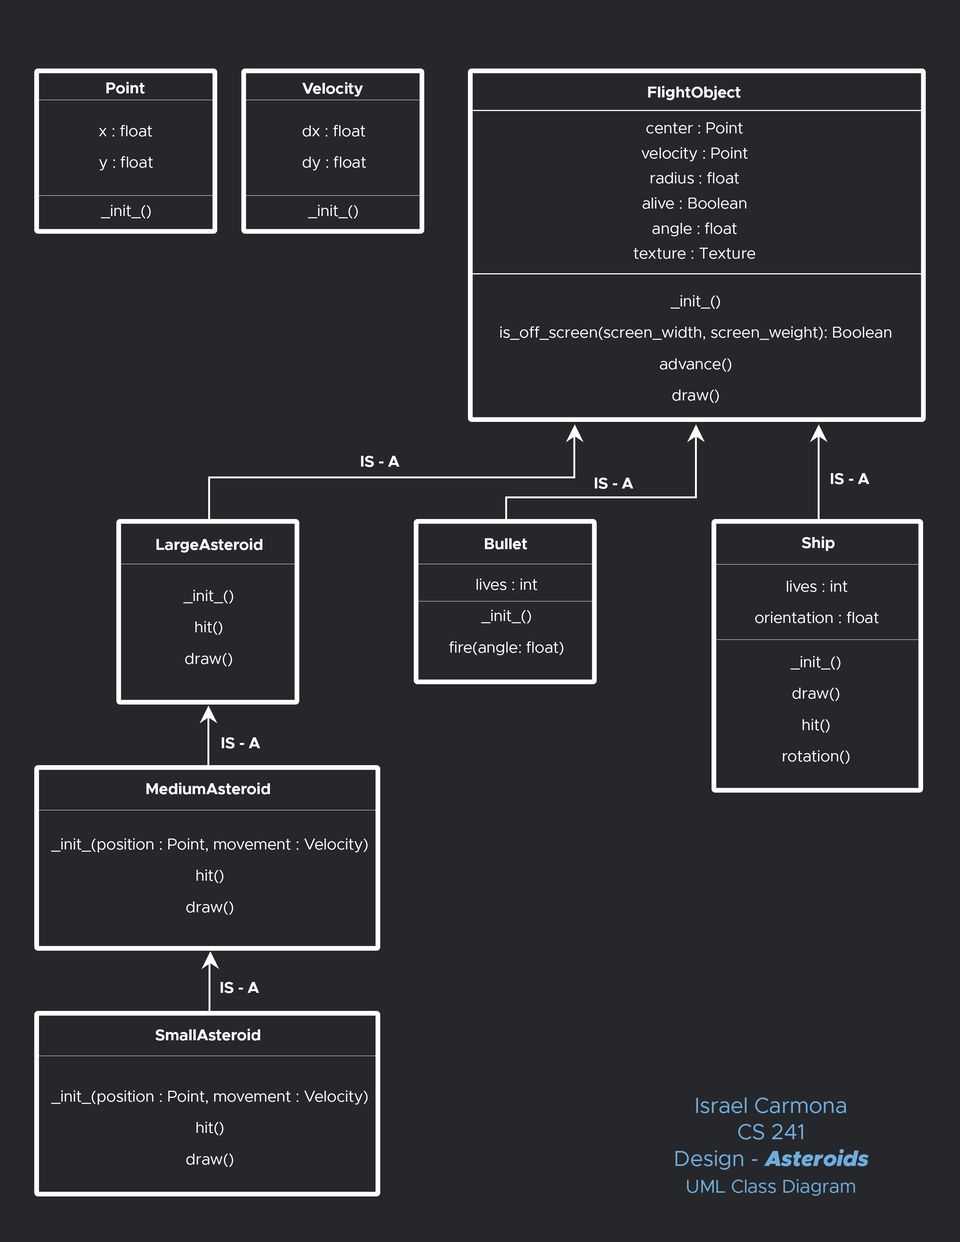
<style>
.page{position:relative;width:960px;height:1242px;background:#26272b}
.page>*{position:absolute;margin:0}
.t1{font:15.7px "Metropolis-Bold";letter-spacing:-0.012em;color:#fbfcfe}
.t2{font:15.7px/15.7px "Metropolis-Regular";letter-spacing:-0.012em;color:#fbfcfe}
.t3{font:15.7px/12.5px "Metropolis-Regular";letter-spacing:-0.012em;color:#fbfcfe}
.t4{font:15.7px "Metropolis-Regular";letter-spacing:-0.012em;color:#fbfcfe}
.t5{font:22px/26.7px "Metropolis-Regular";letter-spacing:-0.012em;color:#6eacdb}
.t6{font:22px/26.7px "Metropolis-BlackItalic";letter-spacing:-0.012em;color:#6eacdb}
.t7{font:18.8px/26.7px "Metropolis-Regular";letter-spacing:-0.012em;color:#6eacdb}
</style>
<div class="page">
<p class="t1" style="left:106px;top:82px;width:39px;height:12px">Point</p>
<p class="t1" style="left:302px;top:82px;width:61px;height:15px">Velocity</p>
<p class="t1" style="left:648px;top:86px;width:93px;height:15px">FlightObject</p>
<p class="t2" style="left:99px;top:125px;width:54px;height:46px">x : float<br><br>y : float</p>
<p class="t2" style="left:303px;top:125px;width:63px;height:46px">dx : float<br><br>dy : float</p>
<p class="t3" style="left:634px;top:122px;width:121px;height:137px;text-align:center">center : Point<br><br>velocity : Point<br><br>radius : float<br><br>alive : Boolean<br><br>angle : float<br><br>texture : Texture</p>
<p class="t4" style="left:101px;top:205px;width:50px;height:14px">_init_()</p>
<p class="t4" style="left:308px;top:205px;width:50px;height:14px">_init_()</p>
<p class="t2" style="left:500px;top:295px;width:391px;height:108px;text-align:center">_init_()<br><br>is_off_screen(screen_width, screen_weight): Boolean<br><br>advance()<br><br>draw()</p>
<p class="t1" style="left:361px;top:456px;width:38px;height:11px">IS - A</p>
<p class="t1" style="left:831px;top:473px;width:38px;height:11px">IS - A</p>
<p class="t1" style="left:595px;top:478px;width:38px;height:11px">IS - A</p>
<p class="t1" style="left:156px;top:538px;width:106px;height:15px">LargeAsteroid</p>
<p class="t1" style="left:485px;top:538px;width:42px;height:12px">Bullet</p>
<p class="t1" style="left:801px;top:536px;width:34px;height:15px">Ship</p>
<p class="t2" style="left:449px;top:579px;width:115px;height:76px;text-align:center">lives : int<br><br>_init_()<br><br>fire(angle: float)</p>
<p class="t2" style="left:755px;top:580px;width:124px;height:43px;text-align:center">lives : int<br><br>orientation : float</p>
<p class="t2" style="left:183px;top:590px;width:50px;height:77px;text-align:center">_init_()<br><br>hit()<br><br>draw()</p>
<p class="t2" style="left:783px;top:656px;width:67px;height:108px;text-align:center">_init_()<br><br>draw()<br><br>hit()<br><br>rotation()</p>
<p class="t1" style="left:222px;top:737px;width:38px;height:12px">IS - A</p>
<p class="t1" style="left:146px;top:783px;width:124px;height:12px">MediumAsteroid</p>
<p class="t2" style="left:51px;top:838px;width:317px;height:77px;text-align:center">_init_(position : Point, movement : Velocity)<br><br>hit()<br><br>draw()</p>
<p class="t1" style="left:221px;top:982px;width:38px;height:11px">IS - A</p>
<p class="t1" style="left:155px;top:1029px;width:105px;height:12px">SmallAsteroid</p>
<p class="t2" style="left:51px;top:1091px;width:317px;height:76px;text-align:center">_init_(position : Point, movement : Velocity)<br><br>hit()<br><br>draw()</p>
<p class="t5" style="left:675px;top:1098px;width:194px;height:98px;text-align:center">Israel Carmona<br>CS 241<br>Design - <span class="t6">Asteroids<br></span><span class="t7">UML Class Diagram</span></p>
</div>
